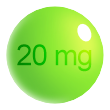
<style>
.page{position:relative;width:110px;height:110px;background:#ffffff}
.page>*{position:absolute;margin:0}
.t1{font:29.3px "ArialMT";letter-spacing:-0.04em}
</style>
<div class="page">
<p class="t1" style="left:17px;top:44px;width:75px;height:28px">20 mg</p>
</div>
